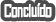
<style>
.page{position:relative;width:56px;height:22px;background:#4c4c4c}
.page>*{position:absolute;margin:0}
.t1{font:14.7px "KafuTechnoStd-E";color:#ffffff;font-weight:bold;scale:0.54 1}
</style>
<div class="page">
<p class="t1" style="left:4px;top:3px;width:48px;height:15px">Concluído</p>
</div>
